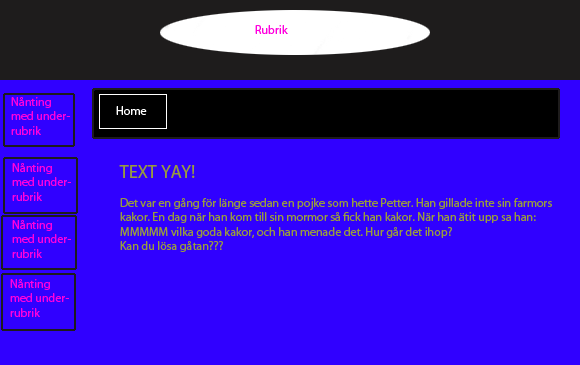
<style>
.page{position:relative;width:580px;height:365px;background:#3000ff}
.page>*{position:absolute;margin:0}
.t1{font:12px "MyriadPro-Regular";color:#ff00de}
.t2{font:12px "MyriadPro-Regular";color:#ffffff}
.t3{font:12px "MyriadPro-Regular";color:#989b3f}
.t4{font:18px "MyriadPro-Regular";color:#989b3f}
</style>
<div class="page">
<p class="t1" style="left:255px;top:25px;width:33px;height:9px">Rubrik</p>
<p class="t1" style="left:11px;top:97px;width:59px;height:38px">Nånting <br>med under-<br>rubrik</p>
<p class="t2" style="left:116px;top:106px;width:31px;height:9px">Home</p>
<p class="t3" style="left:119px;top:165px;width:433px;height:87px"><span class="t4">TEXT YAY!<br></span><br>Det var en gång för länge sedan en pojke som hette Petter. Han gillade inte sin farmors<br>kakor. En dag när han kom till sin mormor så fick han kakor. När han ätit upp sa han: <br>MMMMM vilka goda kakor, och han menade det. Hur går det ihop?<br>Kan du lösa gåtan???</p>
</div>
